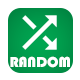
<style>
.page{position:relative;width:80px;height:80px;background:#ffffff}
.page>*{position:absolute;margin:0}
.t1{font:15px "Bauhaus93";color:#ffffff}
</style>
<div class="page">
<p class="t1" style="left:10px;top:56px;width:60px;height:12px">RANDOM</p>
</div>
